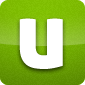
<style>
.page{position:relative;width:85px;height:85px;background:#ffffff}
.page>*{position:absolute;margin:0}
.t1{font:94px "AllerDisplay";letter-spacing:-0.025em;color:#ffffff}
</style>
<div class="page">
<p class="t1" style="left:19px;top:18px;width:44px;height:51px">u</p>
</div>
